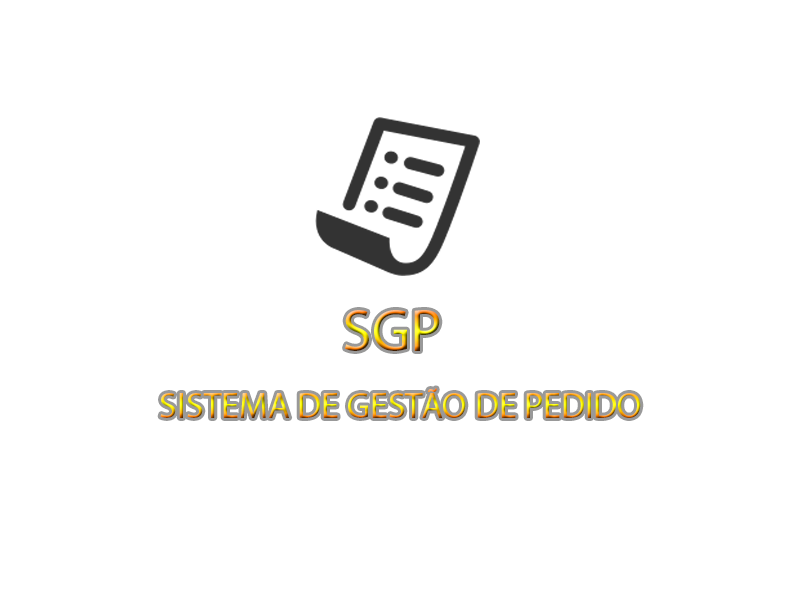
<style>
.page{position:relative;width:800px;height:600px;background:#ffffff}
.page>*{position:absolute;margin:0}
.t1{font:60px "MyriadPro-Regular"}
.t2{font:36px "MyriadPro-Regular"}
</style>
<div class="page">
<p class="t1" style="left:345px;top:310px;width:95px;height:41px">SGP</p>
<p class="t2" style="left:160px;top:388px;width:481px;height:30px">SISTEMA DE GESTÃO DE PEDIDO</p>
</div>
